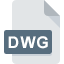
<style>
.page{position:relative;width:64px;height:64px;background:#e2e5e7}
.page>*{position:absolute;margin:0}
.t1{font:16px "Arial-BoldMT";letter-spacing:0.05em;color:#ffffff}
</style>
<div class="page">
<p class="t1" style="left:8px;top:36px;width:40px;height:13px">DWG</p>
</div>
